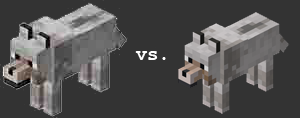
<style>
.page{position:relative;width:300px;height:118px;background:#333333}
.page>*{position:absolute;margin:0}
.t1{font:18.7px "CourierNewPS-BoldMT";color:#ffffff}
</style>
<div class="page">
<p class="t1" style="left:135px;top:51px;width:31px;height:9px">vs.</p>
</div>
